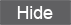
<style>
.page{position:relative;width:71px;height:25px;background:#606062}
.page>*{position:absolute;margin:0}
.t1{font:17.8px "ArialMT";color:#ffffff}
</style>
<div class="page">
<p class="t1" style="left:17px;top:6px;width:36px;height:13px">Hide</p>
</div>
